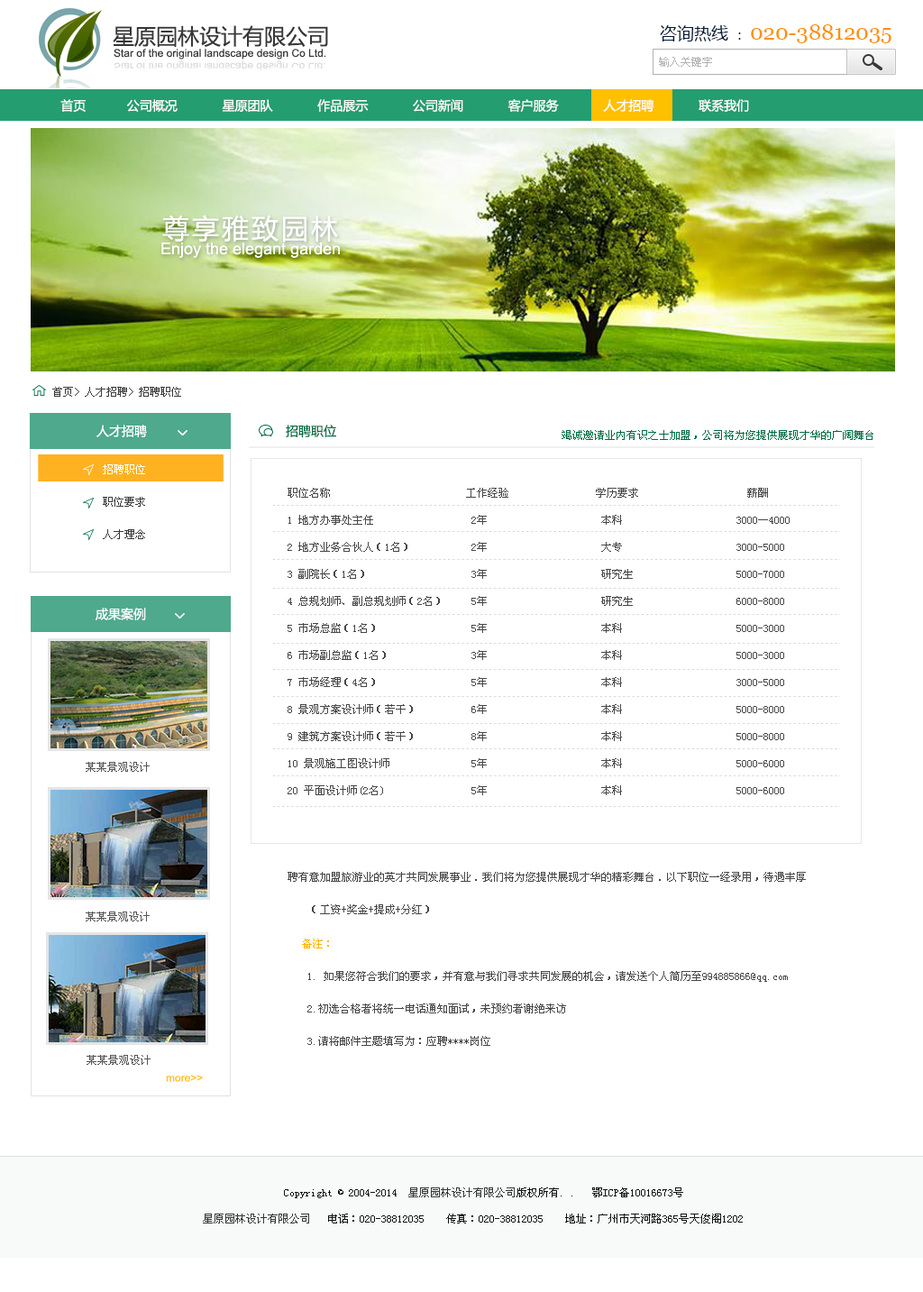
<style>
.page{position:relative;width:923px;height:1292px;background:#ffffff}
.page>*{position:absolute;margin:0}
.t1{font:21.6px "MicrosoftYaHei";color:#373737}
.t2{font:21.6px "Georgia";color:#ff9000}
.t3{font:17.1px "MicrosoftYaHei";color:#001937}
.t4{font:12.6px "MicrosoftYaHei";color:#001937}
.t5{font:10.8px "ArialMT";color:#373737}
.t6{font:10.7px "ArialMT";color:#dcdcdc}
.t7{font:10.8px "SimSun";color:#b1b1b0}
.t8{font:12.6px "MicrosoftYaHei";color:#ffffff}
.t9{font:27px "MicrosoftYaHei";letter-spacing:0.1em;color:#ffffff}
.t10{font:16.2px "ArialMT";color:#ffffff}
.t11{font:10.8px "SimSun";color:#3a3a3a}
.t12{font:12.6px "MicrosoftYaHei";color:#006d44}
.t13{font:10.8px "SimSun";color:#006d44}
.t14{font:10.8px/32.5px "SimSun";color:#3a3a3a}
.t15{font:10.8px/32.5px "SimSun";color:#ffffff}
.t16{font:10.8px/27px "SimSun";color:#474747}
.t17{font:10.8px/32.5px "SimSun";color:#474747}
.t18{font:10.8px "SimSun";color:#545454}
.t19{font:10.8px/16.2px "SimSun";color:#474747}
.t20{font:10.8px/16.2px "SimSun";color:#ffcc53}
.t21{font:10.8px/16.2px "SimSun";color:#ffb300}
.t22{font:10.8px "ArialMT";color:#ffc000}
.t23{font:10.8px "SimSun";color:#131313}
.t24{font:10.8px "SimSun";color:#373737}
</style>
<div class="page">
<p class="t1" style="left:113px;top:25px;width:215px;height:22px">星原园林设计有限公司</p>
<p class="t2" style="left:660px;top:24px;width:232px;height:19px"><span class="t3">咨询热线 </span><span class="t4">： </span>020-38812035</p>
<p class="t5" style="left:114px;top:49px;width:212px;height:10px">Star of the original landscape design Co Ltd.</p>
<p class="t6" style="left:114px;top:60px;width:211px;height:11px">Star of the original landscape design Co Ltd.</p>
<p class="t7" style="left:659px;top:57px;width:53px;height:10px">输入关键字</p>
<p class="t8" style="left:60px;top:99px;width:689px;height:13px">首页           公司概况            星原团队            作品展示            公司新闻            客户服务            人才招聘            联系我们</p>
<p class="t9" style="left:162px;top:215px;width:176px;height:27px">尊享雅致园林</p>
<p class="t10" style="left:161px;top:242px;width:179px;height:16px">Enjoy the elegant garden</p>
<p class="t11" style="left:52px;top:387px;width:129px;height:10px">首页&gt; 人才招聘&gt; 招聘职位</p>
<p class="t8" style="left:96px;top:425px;width:51px;height:12px">人才招聘</p>
<p class="t12" style="left:286px;top:425px;width:50px;height:12px">招聘职位</p>
<p class="t13" style="left:562px;top:430px;width:312px;height:10px">竭诚邀请业内有识之士加盟，公司将为您提供展现才华的广阔舞台</p>
<p class="t14" style="left:103px;top:464px;width:42px;height:75px;text-align:justify"><span class="t15">招聘职位<br></span>职位要求<br>人才理念</p>
<p class="t16" style="left:288px;top:488px;width:518px;height:426px;text-align:justify">职位名称                         工作经验                学历要求                    薪酬<br>1 地方办事处主任                  2年                     本科                     3000—4000<br>2 地方业务合伙人（1名）           2年                     大专                     3000-5000<br>3 副院长（1名）                   3年                     研究生                   5000-7000<br>4 总规划师、副总规划师（2名）     5年                     研究生                   6000-8000<br>5 市场总监（1名）                 5年                     本科                     5000-3000<br>6 市场副总监（1名）               3年                     本科                     5000-3000<br>7 市场经理（4名）                 5年                     本科                     3000-5000                        <br>8 景观方案设计师（若干）          6年                     本科                     5000-8000        <br>9 建筑方案设计师（若干）          8年                     本科                     5000-8000 <br>10 景观施工图设计师               5年                     本科                     5000-6000<br>20 平面设计师(2名)                5年                     本科                     5000-6000<br><br><span class="t17"><br>聘有意加盟旅游业的英才共同发展事业．我们将为您提供展现才华的精彩舞台．以下职位一经录用，待遇丰厚<br>    （工资+奖金+提成+分红）</span></p>
<p class="t8" style="left:96px;top:608px;width:50px;height:12px">成果案例</p>
<p class="t18" style="left:86px;top:762px;width:64px;height:10px">某某景观设计</p>
<p class="t18" style="left:86px;top:911px;width:64px;height:10px">某某景观设计</p>
<p class="t19" style="left:302px;top:938px;width:486px;height:108px;text-align:justify"><span class="t20">   </span><span class="t21">备注：<br></span><br>    1. 如果您符合我们的要求，并有意与我们寻求共同发展的机会，请发送个人简历至994885866@qq.com<br><br>    2.初选合格者将统一电话通知面试，未预约者谢绝来访<br> <br>    3.请将邮件主题填写为：应聘****岗位</p>
<p class="t18" style="left:87px;top:1055px;width:64px;height:10px">某某景观设计</p>
<p class="t22" style="left:166px;top:1075px;width:37px;height:7px">more&gt;&gt;</p>
<p class="t23" style="left:284px;top:1187px;width:399px;height:11px">Copyright © 2004-2014  <span class="t24">星原园林设计有限公司</span>版权所有. .   鄂ICP备10016673号</p>
<p class="t23" style="left:203px;top:1213px;width:540px;height:10px"><span class="t24">星原园林设计有限公司</span>   电话：020-38812035    传真：020-38812035    地址：广州市天河路365号天俊阁1202</p>
</div>
